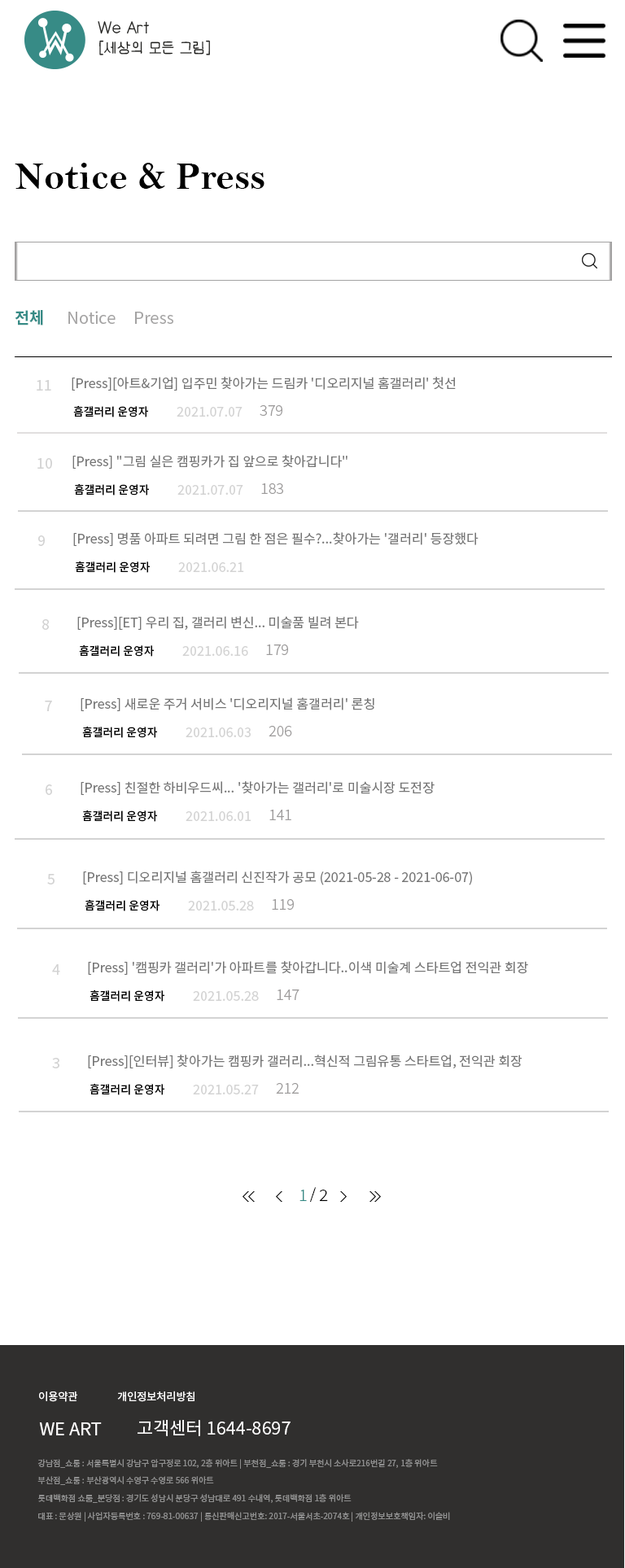
<style>
.page{position:relative;width:625px;height:1568px;background:#ffffff}
.page>*{position:absolute;margin:0}
.t1{font:38.8px "BellMTBold";color:#000000}
.t2{font:16.3px "NotoSansKR-Bold";color:#378b86}
.t3{font:16.3px "NotoSansKR-Regular";color:#a3a2a2}
.t4{font:13.1px "NotoSansKR-Regular";color:#767676}
.t5{font:14.8px "NotoSansKR-Regular";color:#d3d3d3}
.t6{font:11.4px "NotoSansKR-Medium";color:#000000}
.t7{font:13.5px "NotoSansKR-Regular";color:#d3d3d3}
.t8{font:14.8px "NotoSansKR-Light";color:#9d9b9b}
.t9{font:15.6px "NotoSansKR-Light";color:#378b86;scale:1.07 1}
.t10{font:14.8px "NotoSansKR-Light";color:#000000}
.t11{font:15.6px "NotoSansKR-Light";color:#000000;scale:1.07 1}
.t12{font:10.7px "NotoSansKR-Regular";color:#fffefe}
.t13{font:17.8px "NotoSansKR-Regular";color:#fffefe}
.t14{font:8.3px/17.8px "NotoSansKR-Regular";color:#8e8e8e}
</style>
<div class="page">
<p class="t1" style="left:15px;top:163px;width:249px;height:26px">Notice &amp; Press</p>
<p class="t2" style="left:15px;top:310px;width:28px;height:15px">전체</p>
<p class="t3" style="left:68px;top:311px;width:48px;height:13px">Notice</p>
<p class="t3" style="left:135px;top:312px;width:38px;height:12px">Press</p>
<p class="t4" style="left:72px;top:377px;width:384px;height:14px">[Press][아트&amp;기업] 입주민 찾아가는 드림카 '디오리지널 홈갤러리' 첫선</p>
<p class="t5" style="left:37px;top:380px;width:14px;height:11px">11</p>
<p class="t6" style="left:73px;top:405px;width:75px;height:12px">홈갤러리 운영자</p>
<p class="t7" style="left:177px;top:407px;width:65px;height:10px">2021.07.07</p>
<p class="t8" style="left:260px;top:405px;width:22px;height:11px">379</p>
<p class="t5" style="left:37px;top:458px;width:15px;height:11px">10</p>
<p class="t4" style="left:72px;top:455px;width:275px;height:14px">[Press] "그림 실은 캠핑카가 집 앞으로 찾아갑니다"</p>
<p class="t6" style="left:74px;top:483px;width:75px;height:13px">홈갤러리 운영자</p>
<p class="t7" style="left:177px;top:485px;width:66px;height:10px">2021.07.07</p>
<p class="t8" style="left:261px;top:483px;width:22px;height:11px">183</p>
<p class="t4" style="left:73px;top:532px;width:405px;height:14px">[Press] 명품 아파트 되려면 그림 한 점은 필수?...찾아가는 '갤러리' 등장했다</p>
<p class="t5" style="left:38px;top:535px;width:7px;height:11px">9</p>
<p class="t6" style="left:75px;top:561px;width:75px;height:12px">홈갤러리 운영자</p>
<p class="t7" style="left:178px;top:562px;width:66px;height:10px">2021.06.21</p>
<p class="t4" style="left:77px;top:616px;width:282px;height:14px">[Press][ET] 우리 집, 갤러리 변신... 미술품 빌려 본다</p>
<p class="t5" style="left:42px;top:619px;width:7px;height:11px">8</p>
<p class="t6" style="left:79px;top:644px;width:75px;height:13px">홈갤러리 운영자</p>
<p class="t7" style="left:182px;top:646px;width:66px;height:10px">2021.06.16</p>
<p class="t8" style="left:266px;top:644px;width:22px;height:11px">179</p>
<p class="t5" style="left:45px;top:701px;width:7px;height:10px">7</p>
<p class="t4" style="left:81px;top:697px;width:293px;height:14px">[Press] 새로운 주거 서비스 '디오리지널 홈갤러리' 론칭</p>
<p class="t6" style="left:82px;top:726px;width:75px;height:12px">홈갤러리 운영자</p>
<p class="t8" style="left:269px;top:726px;width:23px;height:10px">206</p>
<p class="t7" style="left:186px;top:727px;width:65px;height:10px">2021.06.03</p>
<p class="t5" style="left:46px;top:784px;width:6px;height:11px">6</p>
<p class="t4" style="left:81px;top:781px;width:354px;height:14px">[Press] 친절한 하비우드씨... '찾아가는 갤러리'로 미술시장 도전장</p>
<p class="t6" style="left:82px;top:810px;width:75px;height:12px">홈갤러리 운영자</p>
<p class="t8" style="left:269px;top:810px;width:22px;height:10px">141</p>
<p class="t7" style="left:186px;top:811px;width:65px;height:10px">2021.06.01</p>
<p class="t5" style="left:47px;top:874px;width:8px;height:10px">5</p>
<p class="t4" style="left:83px;top:871px;width:389px;height:14px">[Press] 디오리지널 홈갤러리 신진작가 공모 (2021-05-28 - 2021-06-07)</p>
<p class="t6" style="left:85px;top:899px;width:74px;height:12px">홈갤러리 운영자</p>
<p class="t7" style="left:188px;top:901px;width:66px;height:10px">2021.05.28</p>
<p class="t8" style="left:272px;top:899px;width:22px;height:11px">119</p>
<p class="t5" style="left:52px;top:964px;width:8px;height:11px">4</p>
<p class="t4" style="left:88px;top:961px;width:440px;height:14px">[Press] '캠핑카 갤러리'가 아파트를 찾아갑니다..이색 미술계 스타트업 전익관 회장</p>
<p class="t6" style="left:90px;top:989px;width:74px;height:13px">홈갤러리 운영자</p>
<p class="t8" style="left:277px;top:989px;width:22px;height:11px">147</p>
<p class="t7" style="left:193px;top:991px;width:66px;height:10px">2021.05.28</p>
<p class="t5" style="left:52px;top:1058px;width:7px;height:10px">3</p>
<p class="t4" style="left:88px;top:1055px;width:434px;height:13px">[Press][인터뷰] 찾아가는 캠핑카 갤러리...혁신적 그림유통 스타트업, 전익관 회장</p>
<p class="t6" style="left:90px;top:1083px;width:74px;height:12px">홈갤러리 운영자</p>
<p class="t7" style="left:193px;top:1085px;width:66px;height:9px">2021.05.27</p>
<p class="t8" style="left:276px;top:1083px;width:23px;height:11px">212</p>
<p class="t9" style="left:299px;top:1190px;width:8px;height:11px">1</p>
<p class="t10" style="left:310px;top:1187px;width:6px;height:15px">/</p>
<p class="t11" style="left:319px;top:1190px;width:9px;height:11px">2</p>
<p class="t12" style="left:39px;top:1391px;width:38px;height:11px">이용약관</p>
<p class="t12" style="left:117px;top:1391px;width:77px;height:11px">개인정보처리방침</p>
<p class="t13" style="left:138px;top:1420px;width:152px;height:16px">고객센터 1644-8697</p>
<p class="t13" style="left:39px;top:1422px;width:63px;height:13px">WE ART</p>
<p class="t14" style="left:37px;top:1459px;width:413px;height:63px">강남점_쇼룸 : 서울특별시 강남구 압구정로 102, 2층 위아트 | 부천점_쇼룸 : 경기 부천시 소사로216번길 27, 1층 위아트<br>부산점_쇼룸 : 부산광역시 수영구 수영로 566 위아트<br>롯데백화점 쇼룸_분당점 : 경기도 성남시 분당구 성남대로 491 수내역, 롯데백화점 1층 위아트<br>대표 : 문상원 | 사업자등록번호 : 769-81-00637 | 통신판매신고번호: 2017-서울서초-2074호 | 개인정보보호책임자: 이슬비</p>
</div>
